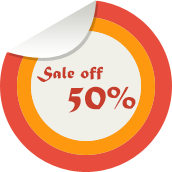
<style>
.page{position:relative;width:172px;height:172px;background:#ffffff}
.page>*{position:absolute;margin:0}
.t1{font:18px "MaturaMTScriptCapitals";color:#c73d2b}
.t2{font:35px "MaturaMTScriptCapitals";color:#c73d2b}
</style>
<div class="page">
<p class="t1" style="left:37px;top:66px;width:66px;height:16px">Sale off</p>
<p class="t2" style="left:68px;top:86px;width:68px;height:27px">50%</p>
</div>
